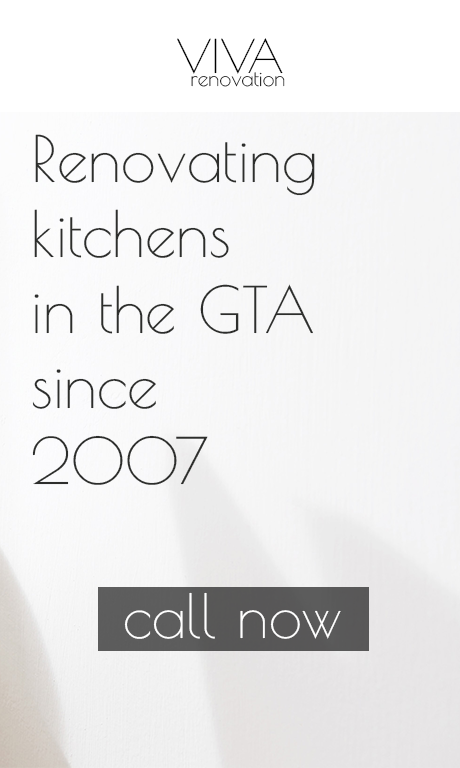
<style>
.page{position:relative;width:460px;height:768px}
.page>*{position:absolute;margin:0}
.t1{font:45.6px "PoiretOne-Regular";color:#000000}
.t2{font:21.3px "PoiretOne-Regular"}
.t3{font:63px "PoiretOne-Regular";color:#2d2e2c}
.t4{font:60px "PoiretOne-Regular";color:#ffffff}
</style>
<div class="page">
<p class="t1" style="left:177px;top:38px;width:106px;height:36px">VIVA</p>
<p class="t2" style="left:191px;top:72px;width:94px;height:15px">renovation</p>
<p class="t3" style="left:32px;top:134px;width:283px;height:351px">Renovating<br>kitchens<br>in the GTA<br>since<br>2007</p>
<p class="t4" style="left:124px;top:592px;width:217px;height:47px">call now</p>
</div>
